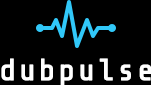
<style>
.page{position:relative;width:151px;height:85px;background:#000000}
.page>*{position:absolute;margin:0}
.t1{font:30px "ShareTechMono-Regular";letter-spacing:0.09em;color:#ffffff;font-weight:bold}
</style>
<div class="page">
<p class="t1" style="left:1px;top:58px;width:151px;height:28px">dubpulse</p>
</div>
